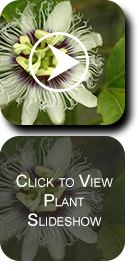
<style>
.page{position:relative;width:139px;height:271px}
.page>*{position:absolute;margin:0}
.t1{font:16.7px/19.4px "ArialMT";color:#ffffff;font-variant:small-caps}
</style>
<div class="page">
<p class="t1" style="left:16px;top:174px;width:97px;height:52px;text-align:center">Click to View Plant<br>Slideshow</p>
</div>
